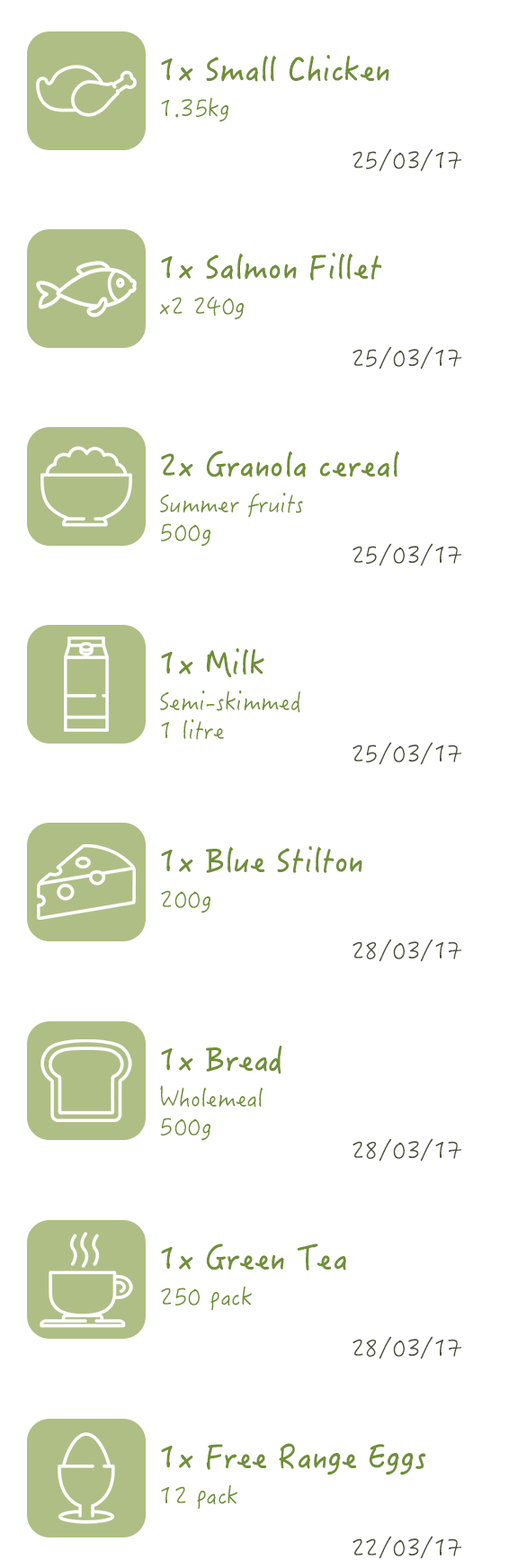
<style>
.page{position:relative;width:509px;height:1568px;background:#ffffff}
.page>*{position:absolute;margin:0}
.t1{font:32.6px "HanziPenTC-W5";color:#708e38}
.t2{font:24.4px "HanziPenTC-W3";color:#708e38}
.t3{font:24.4px "HanziPenTC-W3";color:#4b513a}
.t4{font:24.4px/28.5px "HanziPenTC-W3";color:#708e38}
</style>
<div class="page">
<p class="t1" style="left:161px;top:55px;width:228px;height:27px">1x Small Chicken</p>
<p class="t2" style="left:161px;top:97px;width:68px;height:25px">1.35kg</p>
<p class="t3" style="left:352px;top:148px;width:110px;height:24px">25/03/17</p>
<p class="t1" style="left:161px;top:253px;width:221px;height:28px">1x Salmon Fillet</p>
<p class="t2" style="left:159px;top:297px;width:86px;height:23px">x2 240g</p>
<p class="t3" style="left:352px;top:346px;width:110px;height:24px">25/03/17</p>
<p class="t1" style="left:161px;top:450px;width:238px;height:27px">2x Granola cereal</p>
<p class="t4" style="left:160px;top:493px;width:143px;height:54px">Summer fruits<br>500g</p>
<p class="t3" style="left:352px;top:543px;width:110px;height:23px">25/03/17</p>
<p class="t1" style="left:161px;top:648px;width:103px;height:30px">1x Milk</p>
<p class="t4" style="left:160px;top:690px;width:140px;height:50px">Semi-skimmed<br>1 litre</p>
<p class="t3" style="left:352px;top:742px;width:110px;height:23px">25/03/17</p>
<p class="t1" style="left:161px;top:846px;width:201px;height:27px">1x Blue Stilton</p>
<p class="t2" style="left:161px;top:890px;width:50px;height:23px">200g</p>
<p class="t3" style="left:352px;top:939px;width:110px;height:23px">28/03/17</p>
<p class="t1" style="left:161px;top:1046px;width:121px;height:28px">1x Bread</p>
<p class="t4" style="left:160px;top:1085px;width:103px;height:56px">Wholemeal<br>500g</p>
<p class="t3" style="left:352px;top:1138px;width:110px;height:24px">28/03/17</p>
<p class="t1" style="left:161px;top:1243px;width:185px;height:27px">1x Green Tea</p>
<p class="t2" style="left:161px;top:1286px;width:91px;height:25px">250 pack</p>
<p class="t3" style="left:352px;top:1336px;width:110px;height:23px">28/03/17</p>
<p class="t1" style="left:161px;top:1443px;width:265px;height:32px">1x Free Range Eggs</p>
<p class="t2" style="left:161px;top:1484px;width:76px;height:26px">12 pack</p>
<p class="t3" style="left:352px;top:1536px;width:110px;height:23px">22/03/17</p>
</div>
